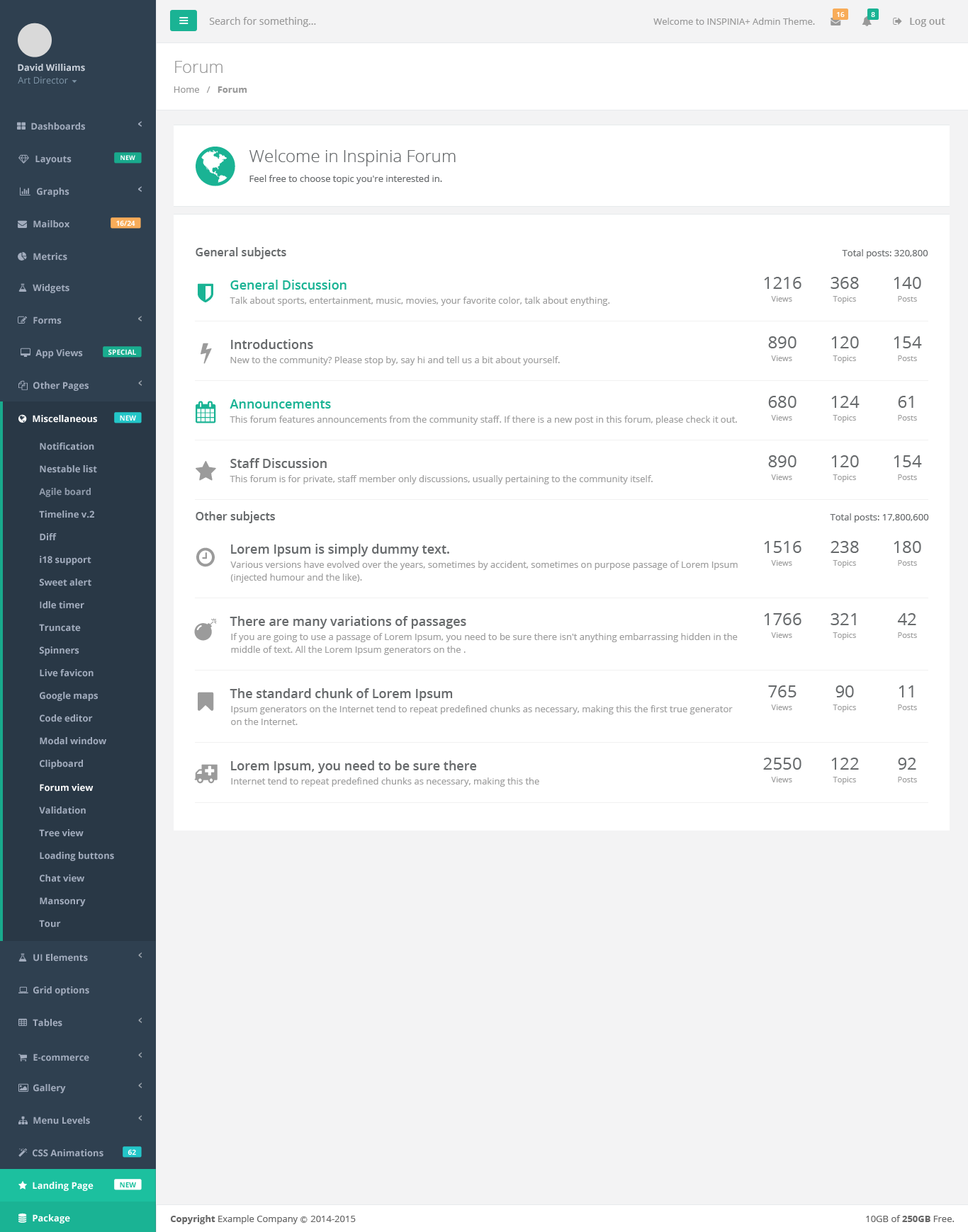
<style>
.page{position:relative;width:968px;height:1232px;background:#ffffff}
.page>*{position:absolute;margin:0}
.t1{font:9.9px "OpenSans";color:#999999}
.t2{font:9.2px "OpenSans";color:#999999}
.t3{font:7.1px "OpenSans-Semibold";color:#ffffff}
.t4{font:9.9px "OpenSans-Semibold";color:#999999}
.t5{font:9.2px "OpenSans-Bold";color:#cad1db}
.t6{font:17px "OpenSans-Light";color:#999999}
.t7{font:9.2px "OpenSans";color:#7d93a5}
.t8{font:9.2px "OpenSans-Bold";color:#999999}
.t9{font:9.2px "OpenSans-Bold";color:#a2acbd}
.t10{font:17px "OpenSans-Light";color:#686b6d}
.t11{font:6.4px "OpenSans-Bold";color:#fefefe}
.t12{font:9.2px "OpenSans";color:#686b6d}
.t13{font:7.1px "OpenSans-Bold";color:#fefefe}
.t14{font:11.3px "OpenSans-Semibold";color:#686b6d}
.t15{font:12.8px "OpenSans-Semibold";color:#1ab394}
.t16{font:17px "OpenSans";color:#676a6c}
.t17{font:9.2px "OpenSans";color:#9e9e9e}
.t18{font:7.8px "OpenSans";color:#9e9e9e}
.t19{font:12.8px "OpenSans-Semibold";color:#676a6c}
.t20{font:9.2px "OpenSans-Bold";color:#ffffff}
.t21{font:9.2px "OpenSans-Bold";color:#8f9aaa}
.t22{font:9.2px/12.8px "OpenSans";color:#9e9e9e}
.t23{font:7.1px "OpenSans-Bold";color:#1cc09f}
.t24{font:9.2px "OpenSans";color:#666666}
.t25{font:9.2px "OpenSans-Bold";color:#666666}
.t26{font:7.1px "Meiryo";color:#666666}
</style>
<div class="page">
<p class="t1" style="left:209px;top:17px;width:107px;height:10px">Search for something...</p>
<p class="t2" style="left:653px;top:18px;width:162px;height:7px">Welcome to INSPINIA+ Admin Theme.</p>
<p class="t3" style="left:837px;top:12px;width:7px;height:5px">16</p>
<p class="t3" style="left:871px;top:12px;width:4px;height:5px">8</p>
<p class="t4" style="left:909px;top:18px;width:36px;height:9px">Log out</p>
<p class="t5" style="left:18px;top:64px;width:67px;height:8px">David Williams</p>
<p class="t6" style="left:175px;top:61px;width:47px;height:12px">Forum</p>
<p class="t7" style="left:18px;top:76px;width:50px;height:8px">Art Director</p>
<p class="t2" style="left:174px;top:86px;width:73px;height:7px">Home   /   <span class="t8">Forum</span></p>
<p class="t9" style="left:31px;top:123px;width:54px;height:7px">Dashboards</p>
<p class="t10" style="left:249px;top:149px;width:206px;height:17px">Welcome in Inspinia Forum</p>
<p class="t9" style="left:35px;top:155px;width:37px;height:9px">Layouts</p>
<p class="t11" style="left:120px;top:155px;width:15px;height:5px">NEW</p>
<p class="t12" style="left:249px;top:175px;width:193px;height:9px">Feel free to choose topic you're interested in.</p>
<p class="t9" style="left:37px;top:188px;width:32px;height:9px">Graphs</p>
<p class="t9" style="left:33px;top:220px;width:36px;height:8px">Mailbox</p>
<p class="t13" style="left:116px;top:220px;width:19px;height:6px">16/24</p>
<p class="t9" style="left:33px;top:253px;width:34px;height:8px">Metrics</p>
<p class="t14" style="left:195px;top:247px;width:91px;height:12px">General subjects</p>
<p class="t12" style="left:841px;top:249px;width:87px;height:10px">Total posts: 320,800</p>
<p class="t15" style="left:230px;top:280px;width:116px;height:10px">General Discussion</p>
<p class="t16" style="left:764px;top:277px;width:37px;height:12px">1216</p>
<p class="t16" style="left:830px;top:277px;width:28px;height:12px">368</p>
<p class="t16" style="left:893px;top:277px;width:28px;height:12px">140</p>
<p class="t9" style="left:33px;top:284px;width:36px;height:9px">Widgets</p>
<p class="t17" style="left:229px;top:297px;width:381px;height:9px">Talk about sports, entertainment, music, movies, your favorite color, talk about enything.</p>
<p class="t18" style="left:771px;top:296px;width:21px;height:6px">Views</p>
<p class="t18" style="left:832px;top:296px;width:24px;height:8px">Topics</p>
<p class="t18" style="left:897px;top:296px;width:20px;height:6px">Posts</p>
<p class="t9" style="left:33px;top:317px;width:29px;height:7px">Forms</p>
<p class="t19" style="left:231px;top:339px;width:82px;height:10px">Introductions</p>
<p class="t16" style="left:768px;top:336px;width:28px;height:12px">890</p>
<p class="t16" style="left:831px;top:336px;width:27px;height:12px">120</p>
<p class="t16" style="left:893px;top:336px;width:28px;height:12px">154</p>
<p class="t9" style="left:35px;top:349px;width:48px;height:9px">App Views</p>
<p class="t13" style="left:108px;top:349px;width:28px;height:6px">SPECIAL</p>
<p class="t17" style="left:230px;top:356px;width:330px;height:9px">New to the community? Please stop by, say hi and tell us a bit about yourself.</p>
<p class="t18" style="left:771px;top:356px;width:21px;height:5px">Views</p>
<p class="t18" style="left:832px;top:356px;width:24px;height:7px">Topics</p>
<p class="t18" style="left:897px;top:356px;width:20px;height:5px">Posts</p>
<p class="t9" style="left:33px;top:382px;width:56px;height:9px">Other Pages</p>
<p class="t15" style="left:229px;top:399px;width:102px;height:10px">Announcements</p>
<p class="t16" style="left:768px;top:396px;width:28px;height:12px">680</p>
<p class="t16" style="left:831px;top:396px;width:28px;height:12px">124</p>
<p class="t16" style="left:897px;top:396px;width:16px;height:12px">61</p>
<p class="t20" style="left:33px;top:415px;width:64px;height:8px">Miscellaneous</p>
<p class="t13" style="left:120px;top:415px;width:16px;height:6px">NEW</p>
<p class="t17" style="left:229px;top:416px;width:508px;height:9px">This forum features announcements from the community staff. If there is a new post in this forum, please check it out.</p>
<p class="t18" style="left:771px;top:415px;width:21px;height:6px">Views</p>
<p class="t18" style="left:832px;top:415px;width:24px;height:8px">Topics</p>
<p class="t18" style="left:897px;top:415px;width:20px;height:6px">Posts</p>
<p class="t9" style="left:40px;top:443px;width:54px;height:7px">Notification</p>
<p class="t19" style="left:230px;top:458px;width:97px;height:10px">Staff Discussion</p>
<p class="t16" style="left:768px;top:455px;width:28px;height:12px">890</p>
<p class="t16" style="left:831px;top:455px;width:27px;height:12px">120</p>
<p class="t16" style="left:893px;top:455px;width:28px;height:12px">154</p>
<p class="t9" style="left:40px;top:465px;width:57px;height:8px">Nestable list</p>
<p class="t17" style="left:229px;top:475px;width:423px;height:9px">This forum is for private, staff member only discussions, usually pertaining to the community itself.</p>
<p class="t18" style="left:771px;top:475px;width:21px;height:5px">Views</p>
<p class="t18" style="left:832px;top:475px;width:24px;height:7px">Topics</p>
<p class="t18" style="left:897px;top:475px;width:20px;height:5px">Posts</p>
<p class="t21" style="left:39px;top:488px;width:52px;height:9px">Agile board</p>
<p class="t9" style="left:39px;top:511px;width:55px;height:7px">Timeline v.2</p>
<p class="t14" style="left:195px;top:511px;width:80px;height:12px">Other subjects</p>
<p class="t12" style="left:829px;top:514px;width:100px;height:9px">Total posts: 17,800,600</p>
<p class="t9" style="left:40px;top:533px;width:17px;height:7px">Diff</p>
<p class="t19" style="left:231px;top:544px;width:218px;height:13px">Lorem Ipsum is simply dummy text.</p>
<p class="t16" style="left:764px;top:541px;width:37px;height:12px">1516</p>
<p class="t16" style="left:830px;top:541px;width:28px;height:12px">238</p>
<p class="t16" style="left:893px;top:541px;width:28px;height:12px">180</p>
<p class="t9" style="left:40px;top:556px;width:51px;height:9px">i18 support</p>
<p class="t22" style="left:230px;top:561px;width:507px;height:22px">Various versions have evolved over the years, sometimes by accident, sometimes on purpose passage of Lorem Ipsum (injected humour and the like).</p>
<p class="t18" style="left:771px;top:560px;width:21px;height:6px">Views</p>
<p class="t18" style="left:832px;top:560px;width:24px;height:8px">Topics</p>
<p class="t18" style="left:897px;top:560px;width:20px;height:6px">Posts</p>
<p class="t9" style="left:39px;top:579px;width:52px;height:7px">Sweet alert</p>
<p class="t9" style="left:40px;top:601px;width:44px;height:8px">Idle timer</p>
<p class="t19" style="left:229px;top:616px;width:237px;height:13px">There are many variations of passages</p>
<p class="t16" style="left:764px;top:613px;width:37px;height:12px">1766</p>
<p class="t16" style="left:830px;top:613px;width:26px;height:12px">321</p>
<p class="t16" style="left:897px;top:613px;width:19px;height:12px">42</p>
<p class="t9" style="left:39px;top:624px;width:42px;height:8px">Truncate</p>
<p class="t22" style="left:231px;top:633px;width:506px;height:22px">If you are going to use a passage of Lorem Ipsum, you need to be sure there isn't anything embarrassing hidden in the middle of text. All the Lorem Ipsum generators on the .</p>
<p class="t18" style="left:771px;top:633px;width:21px;height:5px">Views</p>
<p class="t18" style="left:832px;top:633px;width:24px;height:7px">Topics</p>
<p class="t18" style="left:897px;top:633px;width:20px;height:5px">Posts</p>
<p class="t9" style="left:39px;top:647px;width:40px;height:9px">Spinners</p>
<p class="t9" style="left:40px;top:669px;width:53px;height:8px">Live favicon</p>
<p class="t19" style="left:229px;top:688px;width:224px;height:13px">The standard chunk of Lorem Ipsum</p>
<p class="t16" style="left:768px;top:686px;width:28px;height:12px">765</p>
<p class="t16" style="left:835px;top:686px;width:19px;height:12px">90</p>
<p class="t16" style="left:898px;top:686px;width:15px;height:12px">11</p>
<p class="t9" style="left:40px;top:692px;width:58px;height:9px">Google maps</p>
<p class="t22" style="left:231px;top:705px;width:501px;height:20px">Ipsum generators on the Internet tend to repeat predefined chunks as necessary, making this the first true generator on the Internet.</p>
<p class="t18" style="left:771px;top:705px;width:21px;height:5px">Views</p>
<p class="t18" style="left:832px;top:705px;width:24px;height:8px">Topics</p>
<p class="t18" style="left:897px;top:705px;width:20px;height:5px">Posts</p>
<p class="t9" style="left:40px;top:715px;width:53px;height:7px">Code editor</p>
<p class="t9" style="left:40px;top:737px;width:66px;height:8px">Modal window</p>
<p class="t9" style="left:40px;top:760px;width:43px;height:9px">Clipboard</p>
<p class="t19" style="left:231px;top:761px;width:246px;height:12px">Lorem Ipsum, you need to be sure there</p>
<p class="t16" style="left:763px;top:758px;width:38px;height:12px">2550</p>
<p class="t16" style="left:831px;top:758px;width:27px;height:12px">122</p>
<p class="t16" style="left:897px;top:758px;width:19px;height:12px">92</p>
<p class="t20" style="left:40px;top:784px;width:53px;height:8px">Forum view</p>
<p class="t17" style="left:231px;top:778px;width:308px;height:9px">Internet tend to repeat predefined chunks as necessary, making this the</p>
<p class="t18" style="left:771px;top:777px;width:21px;height:6px">Views</p>
<p class="t18" style="left:832px;top:777px;width:24px;height:8px">Topics</p>
<p class="t18" style="left:897px;top:777px;width:20px;height:6px">Posts</p>
<p class="t9" style="left:39px;top:807px;width:47px;height:8px">Validation</p>
<p class="t9" style="left:39px;top:829px;width:45px;height:8px">Tree view</p>
<p class="t9" style="left:40px;top:852px;width:74px;height:9px">Loading buttons</p>
<p class="t9" style="left:40px;top:875px;width:44px;height:8px">Chat view</p>
<p class="t9" style="left:40px;top:897px;width:46px;height:10px">Mansonry</p>
<p class="t9" style="left:39px;top:920px;width:22px;height:8px">Tour</p>
<p class="t9" style="left:33px;top:954px;width:55px;height:8px">UI Elements</p>
<p class="t9" style="left:33px;top:987px;width:56px;height:9px">Grid options</p>
<p class="t9" style="left:33px;top:1019px;width:29px;height:8px">Tables</p>
<p class="t9" style="left:33px;top:1054px;width:56px;height:8px">E-commerce</p>
<p class="t9" style="left:33px;top:1084px;width:33px;height:10px">Gallery</p>
<p class="t9" style="left:33px;top:1117px;width:57px;height:8px">Menu Levels</p>
<p class="t9" style="left:33px;top:1150px;width:70px;height:7px">CSS Animations</p>
<p class="t13" style="left:127px;top:1150px;width:9px;height:5px">62</p>
<p class="t20" style="left:33px;top:1182px;width:60px;height:9px">Landing Page</p>
<p class="t23" style="left:120px;top:1182px;width:16px;height:6px">NEW</p>
<p class="t20" style="left:33px;top:1215px;width:37px;height:9px">Package</p>
<p class="t24" style="left:170px;top:1215px;width:186px;height:10px"><span class="t25">Copyright</span> Example Company <span class="t26">Ⓒ </span>2014-2015</p>
<p class="t24" style="left:866px;top:1215px;width:88px;height:8px">10GB of <span class="t25">250GB</span> Free.</p>
</div>
